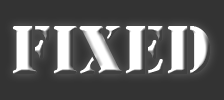
<style>
.page{position:relative;width:224px;height:100px;background:#333333}
.page>*{position:absolute;margin:0}
.t1{font:72px "Stencil"}
</style>
<div class="page">
<p class="t1" style="left:12px;top:26px;width:199px;height:48px">FIXED</p>
</div>
